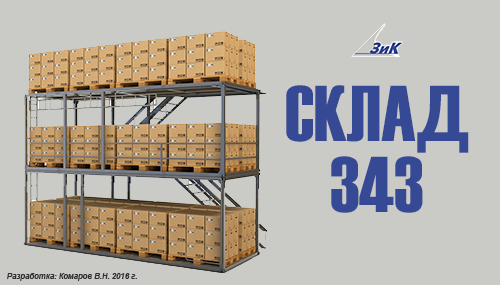
<style>
.page{position:relative;width:500px;height:285px;background:#cacbc6}
.page>*{position:absolute;margin:0}
.t1{font:78.9px "Haettenschweiler";color:#354995}
.t2{font:7.7px "Arial-BoldItalicMT";color:#303031}
</style>
<div class="page">
<p class="t1" style="left:286px;top:85px;width:183px;height:128px">СКЛАД 343</p>
<p class="t2" style="left:7px;top:273px;width:130px;height:8px">Разработка: Комаров В.Н. 2016 г.</p>
</div>
